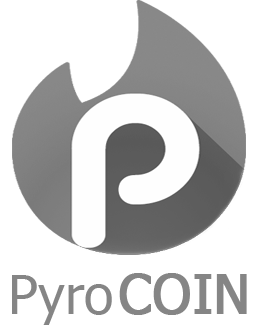
<style>
.page{position:relative;width:256px;height:325px;background:#ffffff}
.page>*{position:absolute;margin:0}
.t1{font:54px "Tahoma";color:#858585}
.t2{font:54px "Tahoma";color:#858585;text-transform:uppercase;font-weight:bold}
</style>
<div class="page">
<p class="t1" style="left:12px;top:275px;width:100px;height:50px">Pyro</p>
<p class="t2" style="left:119px;top:273px;width:128px;height:42px">Coin</p>
</div>
